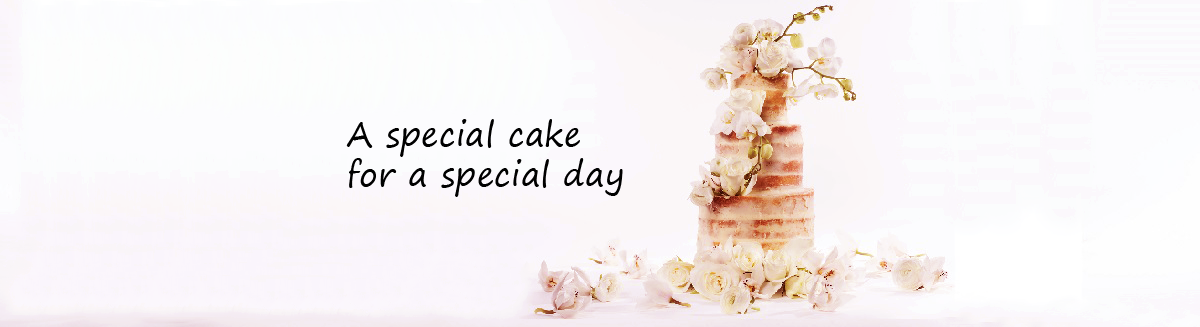
<style>
.page{position:relative;width:1200px;height:327px}
.page>*{position:absolute;margin:0}
.t1{font:33.3px "SegoePrint";color:#000000}
</style>
<div class="page">
<p class="t1" style="left:346px;top:119px;width:277px;height:78px">A special cake <br>for a special day</p>
</div>
